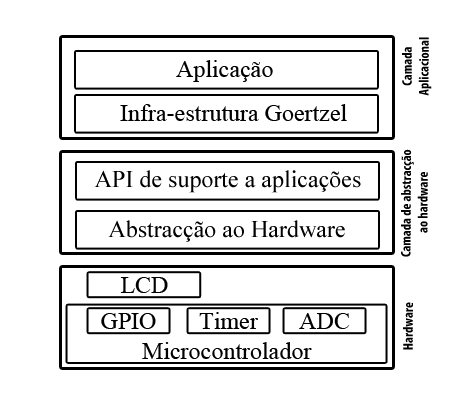
<style>
.page{position:relative;width:450px;height:400px;background:#ffffff}
.page>*{position:absolute;margin:0}
.t1{font:14px "MyriadPro-BoldCond";color:#000000}
.t2{font:24px "TimesNewRomanPSMT";color:#000000}
</style>
<div class="page">
<p class="t1" style="left:402px;top:37px;width:30px;height:59px;text-align:center;rotate:-90deg">Camada<br>Aplicacional</p>
<p class="t2" style="left:176px;top:60px;width:97px;height:22px">Aplicação</p>
<p class="t2" style="left:120px;top:104px;width:227px;height:17px">Infra-estrutura Goertzel</p>
<p class="t1" style="left:401px;top:149px;width:27px;height:108px;text-align:center;rotate:-90deg">Camada de abstracção <br>ao hardware</p>
<p class="t2" style="left:94px;top:170px;width:267px;height:23px">API de suporte a aplicações</p>
<p class="t2" style="left:108px;top:220px;width:237px;height:22px">Abstracção ao Hardware</p>
<p class="t2" style="left:120px;top:277px;width:48px;height:16px">LCD</p>
<p class="t1" style="left:403px;top:302px;width:10px;height:48px;rotate:-90deg">Hardware</p>
<p class="t2" style="left:101px;top:313px;width:55px;height:16px">GPIO</p>
<p class="t2" style="left:199px;top:312px;width:59px;height:17px">Timer</p>
<p class="t2" style="left:299px;top:313px;width:51px;height:16px">ADC</p>
<p class="t2" style="left:142px;top:342px;width:170px;height:17px">Microcontrolador</p>
</div>
